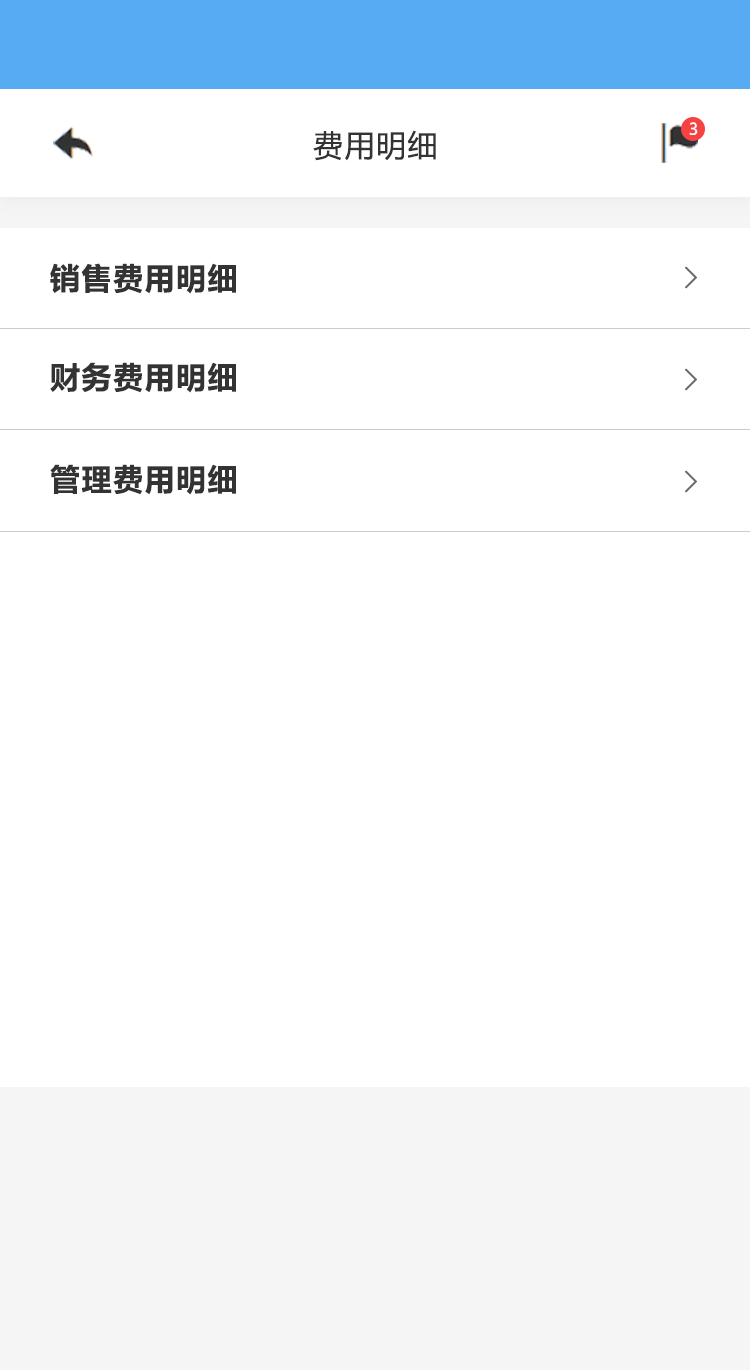
<style>
.page{position:relative;width:750px;height:1370px;background:#ffffff}
.page>*{position:absolute;margin:0}
.t1{font:16px "MicrosoftYaHeiUI";color:#ffffff}
.t2{font:30px "MicrosoftYaHeiUI";letter-spacing:0.05em;color:#333333}
.t3{font:30px "MicrosoftYaHeiUI-Bold";letter-spacing:0.05em;color:#333333}
.t4{font:30px "FangSong";letter-spacing:0.05em;color:#6c6c6c;font-weight:bold}
</style>
<div class="page">
<p class="t1" style="left:689px;top:122px;width:9px;height:13px">3</p>
<p class="t2" style="left:313px;top:130px;width:123px;height:31px">费用明细</p>
<p class="t3" style="left:50px;top:263px;width:186px;height:31px">销售费用明细</p>
<p class="t4" style="left:685px;top:266px;width:12px;height:23px">&gt;</p>
<p class="t3" style="left:50px;top:362px;width:186px;height:31px">财务费用明细</p>
<p class="t4" style="left:685px;top:368px;width:12px;height:23px">&gt;</p>
<p class="t3" style="left:50px;top:464px;width:186px;height:31px">管理费用明细</p>
<p class="t4" style="left:685px;top:470px;width:12px;height:23px">&gt;</p>
</div>
